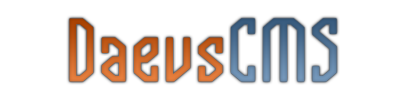
<style>
.page{position:relative;width:400px;height:100px;background:#ffffff}
.page>*{position:absolute;margin:0}
.t1{font:100px "SupraGeniusLinesBRK";letter-spacing:0.005em;font-weight:bold;scale:1.2 1}
</style>
<div class="page">
<p class="t1" style="left:69px;top:18px;width:268px;height:64px">DaevsCMS</p>
</div>
